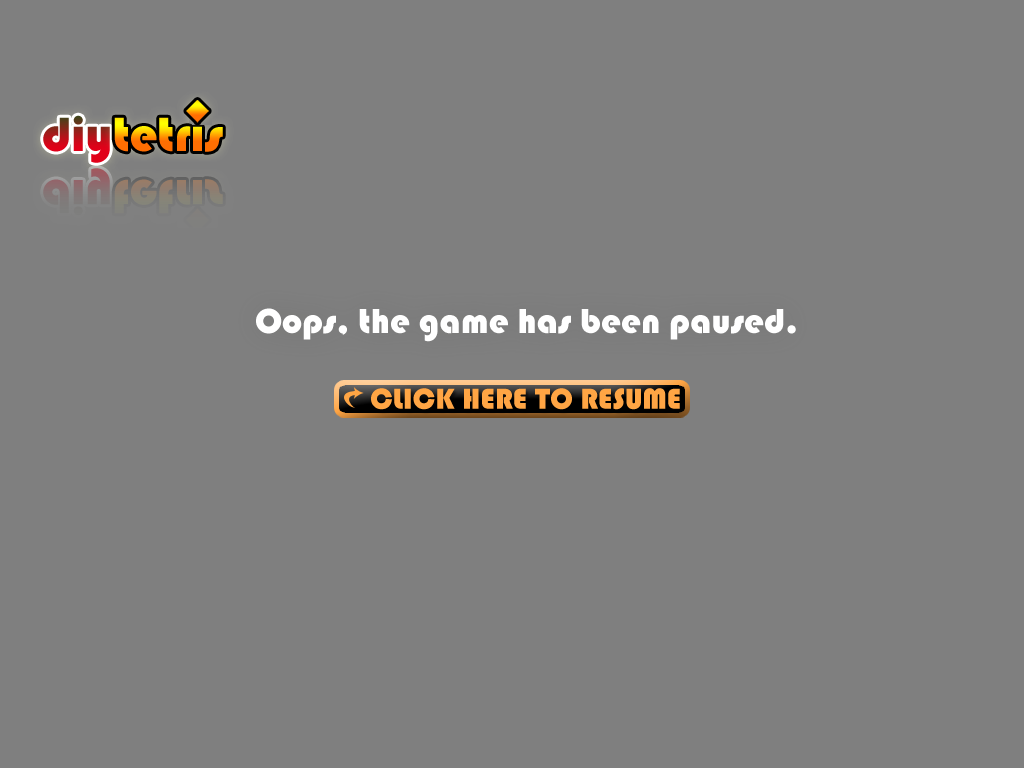
<style>
.page{position:relative;width:1024px;height:768px;background:#7f7f7f}
.page>*{position:absolute;margin:0}
.t1{font:36px "Bauhaus93";color:#ffffff}
.t2{font:29.9px "Bauhaus93";color:#ffa544}
</style>
<div class="page">
<p class="t1" style="left:256px;top:308px;width:540px;height:34px">Oops, the game has been paused.</p>
<p class="t2" style="left:371px;top:388px;width:309px;height:22px">CLICK HERE TO RESUME</p>
</div>
